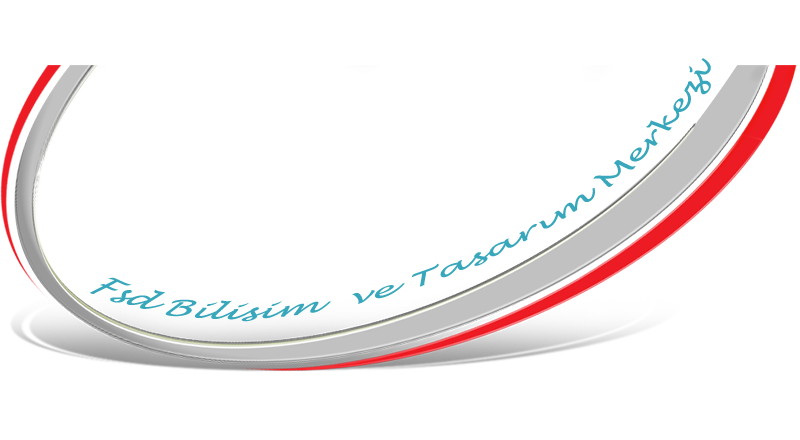
<style>
.page{position:relative;width:800px;height:440px;background:#ffffff}
.page>*{position:absolute;margin:0}
.t1{font:18.4px "LucidaHandwriting-Italic";color:#38a7bb;scale:1.86 1}
</style>
<div class="page">
<p class="t1" style="left:90px;top:58px;width:621px;height:264px;rotate:-20deg">Fsd Bilisim  ve Tasarım Merkezi</p>
</div>
